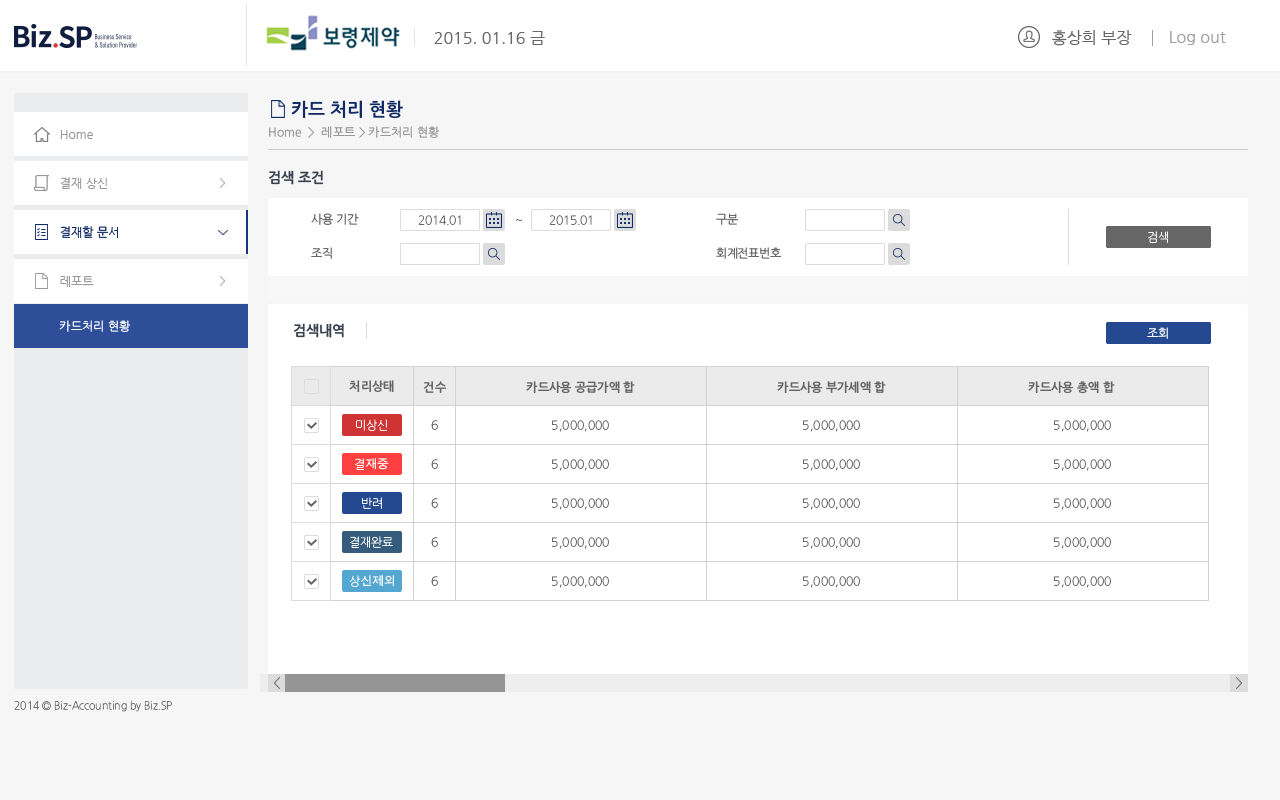
<style>
.page{position:relative;width:1280px;height:800px;background:#ffffff}
.page>*{position:absolute;margin:0}
.t1{font:16px "NanumGothic";color:#666666}
.t2{font:16px "NanumGothic";color:#a0a0a0}
.t3{font:18px "NanumGothicOTFBold";color:#122b66}
.t4{font:12px "NanumGothicOTF";color:#999999}
.t5{font:12px "NanumGothic";color:#999999}
.t6{font:14px "NanumGothicOTFBold";color:#38424e}
.t7{font:12px "NanumGothicOTF";letter-spacing:-0.025em;color:#666666}
.t8{font:12px "NanumGothicOTFLight";letter-spacing:-0.025em;color:#666666}
.t9{font:12px "NanumGothic";color:#122b66}
.t10{font:12px "NanumGothicOTFLight";letter-spacing:-0.025em;color:#ffffff}
.t11{font:12px "NanumGothicOTF";color:#ffffff}
.t12{font:12px "NanumGothicOTF";letter-spacing:-0.025em;color:#ffffff}
.t13{font:12px "NanumGothicOTFBold";color:#666666}
.t14{font:12px "NanumGothicOTFLight";color:#666666}
.t15{font:12px "AppleGothic";letter-spacing:-0.025em;color:#ffffff}
.t16{font:11px "NanumGothicOTFLight";color:#6c6d6d;scale:0.94 1}
</style>
<div class="page">
<p class="t1" style="left:1052px;top:30px;width:80px;height:16px">홍상희 부장</p>
<p class="t1" style="left:434px;top:31px;width:111px;height:14px">2015. 01.16 금</p>
<p class="t2" style="left:1170px;top:31px;width:56px;height:14px">Log out</p>
<p class="t3" style="left:291px;top:100px;width:112px;height:19px">카드 처리 현황</p>
<p class="t4" style="left:269px;top:126px;width:171px;height:12px">Home  &gt;  레포트 &gt; 카드처리 현황</p>
<p class="t5" style="left:60px;top:130px;width:33px;height:9px">Home</p>
<p class="t6" style="left:269px;top:170px;width:55px;height:15px">검색 조건</p>
<p class="t5" style="left:60px;top:177px;width:48px;height:12px">결제 상신</p>
<p class="t5" style="left:60px;top:177px;width:48px;height:12px">결재 상신</p>
<p class="t7" style="left:311px;top:213px;width:48px;height:12px">사용 기간</p>
<p class="t8" style="left:418px;top:215px;width:43px;height:10px">2014.01</p>
<p class="t8" style="left:516px;top:219px;width:6px;height:2px">~</p>
<p class="t8" style="left:549px;top:215px;width:43px;height:10px">2015.01</p>
<p class="t7" style="left:716px;top:213px;width:22px;height:12px">구분</p>
<p class="t9" style="left:60px;top:226px;width:58px;height:12px">결재할 문서</p>
<p class="t10" style="left:1148px;top:231px;width:20px;height:12px">검색</p>
<p class="t10" style="left:1148px;top:231px;width:20px;height:12px">검색</p>
<p class="t7" style="left:311px;top:247px;width:21px;height:12px">조직</p>
<p class="t7" style="left:716px;top:247px;width:65px;height:12px">회계전표번호</p>
<p class="t5" style="left:60px;top:276px;width:34px;height:11px">레포트</p>
<p class="t5" style="left:60px;top:276px;width:34px;height:11px">레포트</p>
<p class="t11" style="left:59px;top:320px;width:72px;height:12px">카드처리 현황</p>
<p class="t6" style="left:294px;top:323px;width:50px;height:15px">검색내역</p>
<p class="t12" style="left:1147px;top:327px;width:21px;height:12px">조회</p>
<p class="t13" style="left:349px;top:380px;width:45px;height:12px">처리상태</p>
<p class="t13" style="left:423px;top:381px;width:24px;height:12px">건수</p>
<p class="t13" style="left:526px;top:381px;width:109px;height:12px">카드사용 공급가액 합</p>
<p class="t13" style="left:777px;top:381px;width:109px;height:12px">카드사용 부가세액 합</p>
<p class="t13" style="left:1028px;top:381px;width:87px;height:13px">카드사용 총액 합</p>
<p class="t10" style="left:356px;top:419px;width:32px;height:12px">미상신</p>
<p class="t14" style="left:431px;top:420px;width:7px;height:10px">6</p>
<p class="t14" style="left:552px;top:420px;width:57px;height:12px">5,000,000</p>
<p class="t14" style="left:803px;top:420px;width:57px;height:12px">5,000,000</p>
<p class="t14" style="left:1054px;top:420px;width:57px;height:12px">5,000,000</p>
<p class="t15" style="left:355px;top:458px;width:34px;height:12px"><span class="t10">결</span>재중</p>
<p class="t14" style="left:431px;top:459px;width:7px;height:10px">6</p>
<p class="t14" style="left:552px;top:459px;width:57px;height:12px">5,000,000</p>
<p class="t14" style="left:803px;top:459px;width:57px;height:12px">5,000,000</p>
<p class="t14" style="left:1054px;top:459px;width:57px;height:12px">5,000,000</p>
<p class="t10" style="left:362px;top:497px;width:20px;height:12px">반려</p>
<p class="t14" style="left:431px;top:498px;width:7px;height:10px">6</p>
<p class="t14" style="left:552px;top:498px;width:57px;height:12px">5,000,000</p>
<p class="t14" style="left:803px;top:498px;width:57px;height:12px">5,000,000</p>
<p class="t14" style="left:1054px;top:498px;width:57px;height:12px">5,000,000</p>
<p class="t10" style="left:350px;top:536px;width:43px;height:12px">결재완료</p>
<p class="t14" style="left:431px;top:537px;width:7px;height:10px">6</p>
<p class="t14" style="left:552px;top:537px;width:57px;height:12px">5,000,000</p>
<p class="t14" style="left:803px;top:537px;width:57px;height:12px">5,000,000</p>
<p class="t14" style="left:1054px;top:537px;width:57px;height:12px">5,000,000</p>
<p class="t15" style="left:349px;top:575px;width:45px;height:12px"><span class="t10">상</span>신제외</p>
<p class="t14" style="left:431px;top:576px;width:7px;height:10px">6</p>
<p class="t14" style="left:552px;top:576px;width:57px;height:12px">5,000,000</p>
<p class="t14" style="left:803px;top:576px;width:57px;height:12px">5,000,000</p>
<p class="t14" style="left:1054px;top:576px;width:57px;height:12px">5,000,000</p>
<p class="t16" style="left:14px;top:700px;width:158px;height:12px">2014 © Biz-Accounting by Biz.SP</p>
</div>
